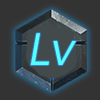
<style>
.page{position:relative;width:100px;height:100px;background:#333333}
.page>*{position:absolute;margin:0}
.t1{font:45.4px "Montserrat-Light";color:#53ffff;font-style:italic}
</style>
<div class="page">
<p class="t1" style="left:30px;top:33px;width:46px;height:32px">Lv</p>
</div>
